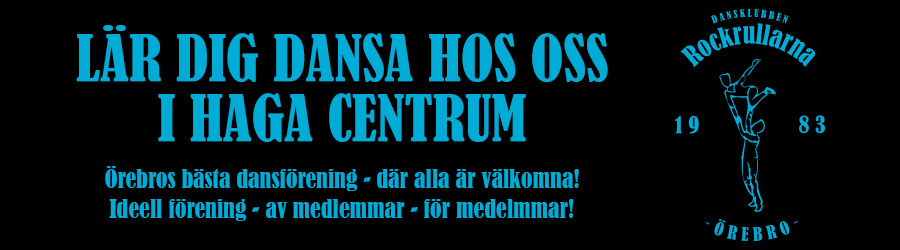
<style>
.page{position:relative;width:900px;height:250px;background:#000000}
.page>*{position:absolute;margin:0}
.t1{font:60px/30px "BernardMT-Condensed";color:#00abd6}
.t2{font:24px/30px "BernardMT-Condensed";color:#00abd6}
</style>
<div class="page">
<p class="t1" style="left:76px;top:25px;width:532px;height:117px;text-align:center">LÄR DIG DANSA HOS OSS <br><br>I HAGA CENTRUM</p>
<p class="t2" style="left:105px;top:166px;width:474px;height:55px;text-align:center">Örebros bästa dansförening - där alla är välkomna!<br>Ideell förening - av medlemmar - för medelmmar!</p>
</div>
